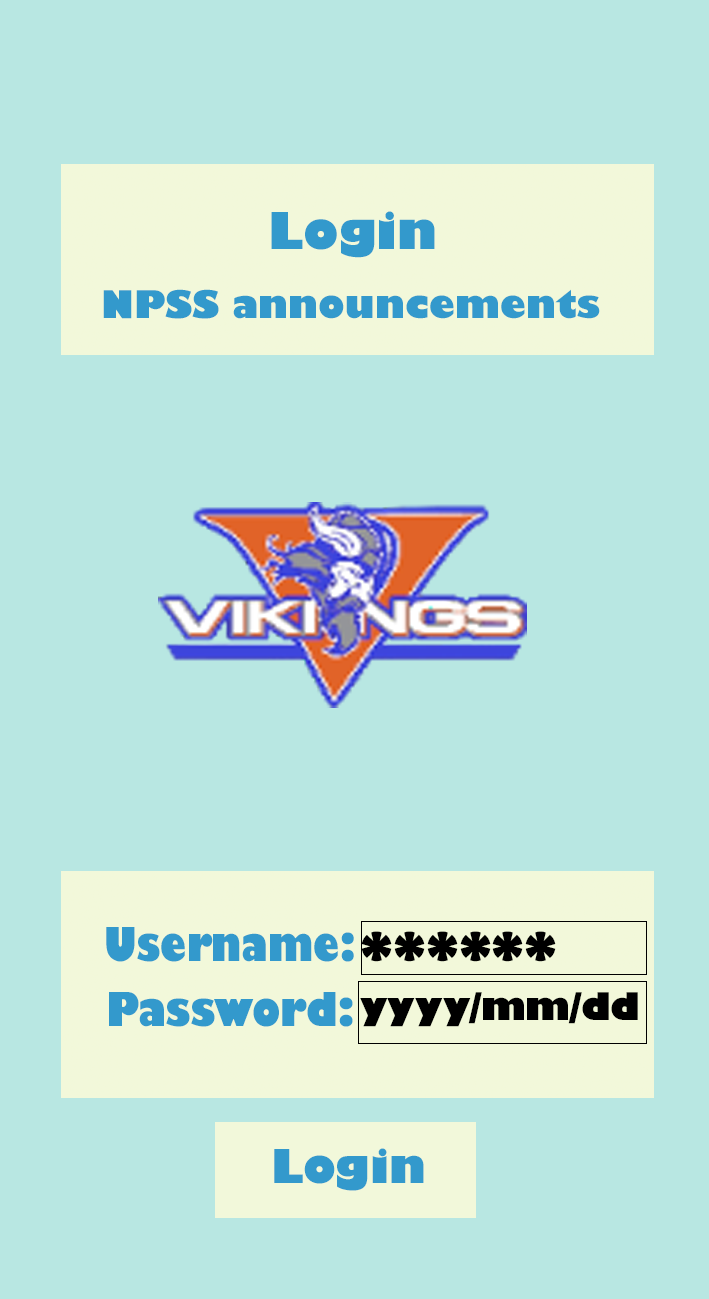
<style>
.page{position:relative;width:709px;height:1299px;background:#b8e7e2}
.page>*{position:absolute;margin:0}
.t1{font:49.8px "GillSans-UltraBold";color:#3399cc}
.t2{font:37.4px "GillSans-UltraBold";color:#3399cc}
.t3{font:45.7px "GillSans-UltraBold";color:#3399cc;scale:0.83 1}
.t4{font:45.7px "GillSans-UltraBold";color:#000000}
.t5{font:45.7px "GillSans-UltraBold";color:#3399cc;scale:0.87 1}
.t6{font:37.4px "GillSans-UltraBold";color:#000000}
.t7{font:45.7px "GillSans-UltraBold";color:#3399cc}
</style>
<div class="page">
<p class="t1" style="left:271px;top:211px;width:164px;height:47px">Login</p>
<p class="t2" style="left:103px;top:289px;width:497px;height:30px">NPSS announcements</p>
<p class="t3" style="left:106px;top:927px;width:248px;height:35px">Username:</p>
<p class="t4" style="left:361px;top:931px;width:195px;height:31px">******</p>
<p class="t5" style="left:109px;top:992px;width:244px;height:35px">Password:</p>
<p class="t6" style="left:360px;top:992px;width:278px;height:35px">yyyy/mm/dd</p>
<p class="t7" style="left:274px;top:1148px;width:150px;height:43px">Login</p>
</div>
